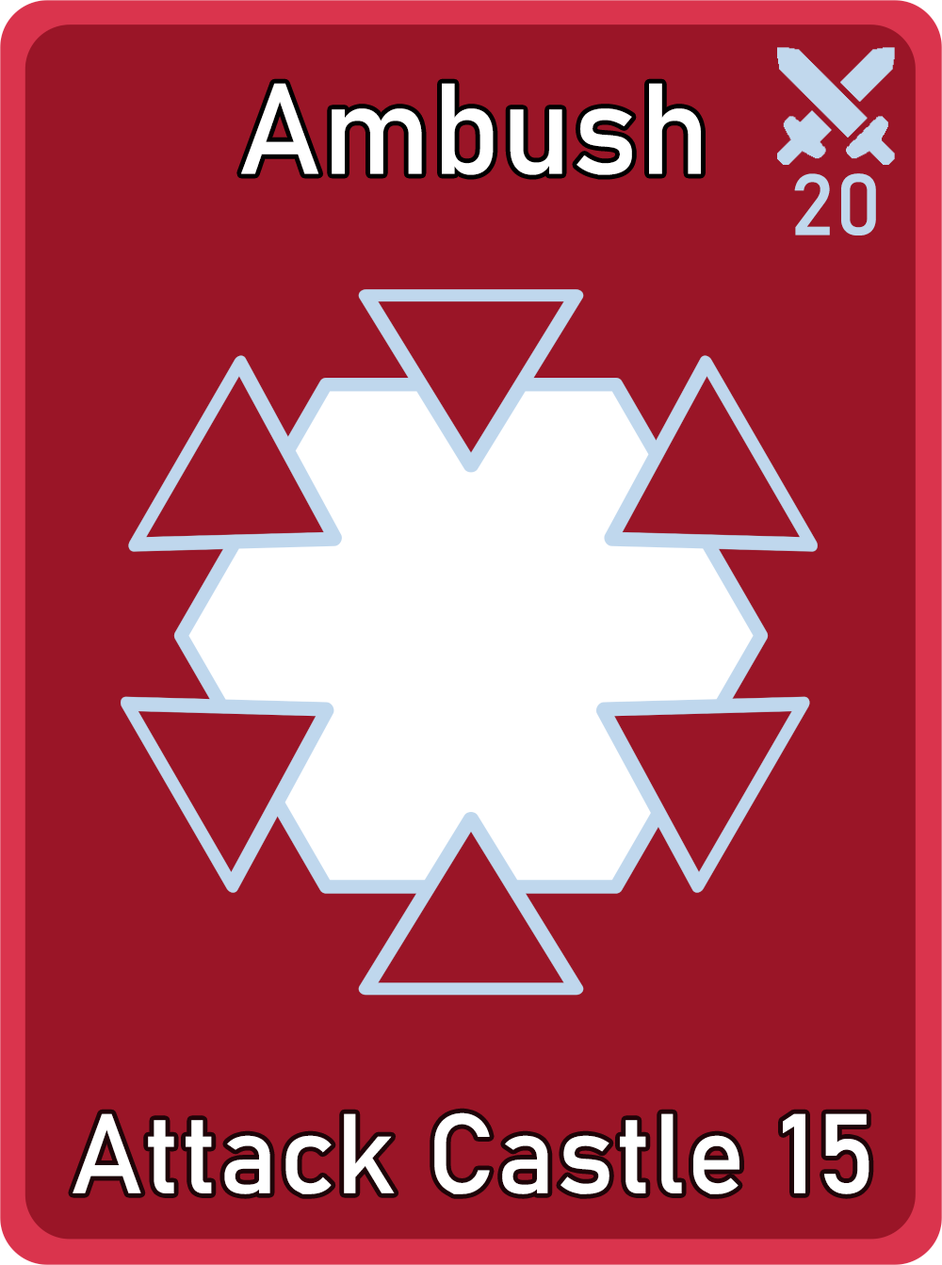
<style>
.page{position:relative;width:942px;height:1265px;background:#9a1527}
.page>*{position:absolute;margin:0}
.t1{font:126.7px "Bahnschrift";letter-spacing:0.01em;color:#ffffff}
.t2{font:85px "Bahnschrift";letter-spacing:0.01em;color:#c1d8ed}
.t3{font:111.3px "Bahnschrift";letter-spacing:0.01em;color:#ffffff}
</style>
<div class="page">
<p class="t1" style="left:241px;top:83px;width:460px;height:92px">Ambush</p>
<p class="t2" style="left:794px;top:173px;width:82px;height:63px">20</p>
<p class="t3" style="left:73px;top:1113px;width:797px;height:82px">Attack Castle 15</p>
</div>
